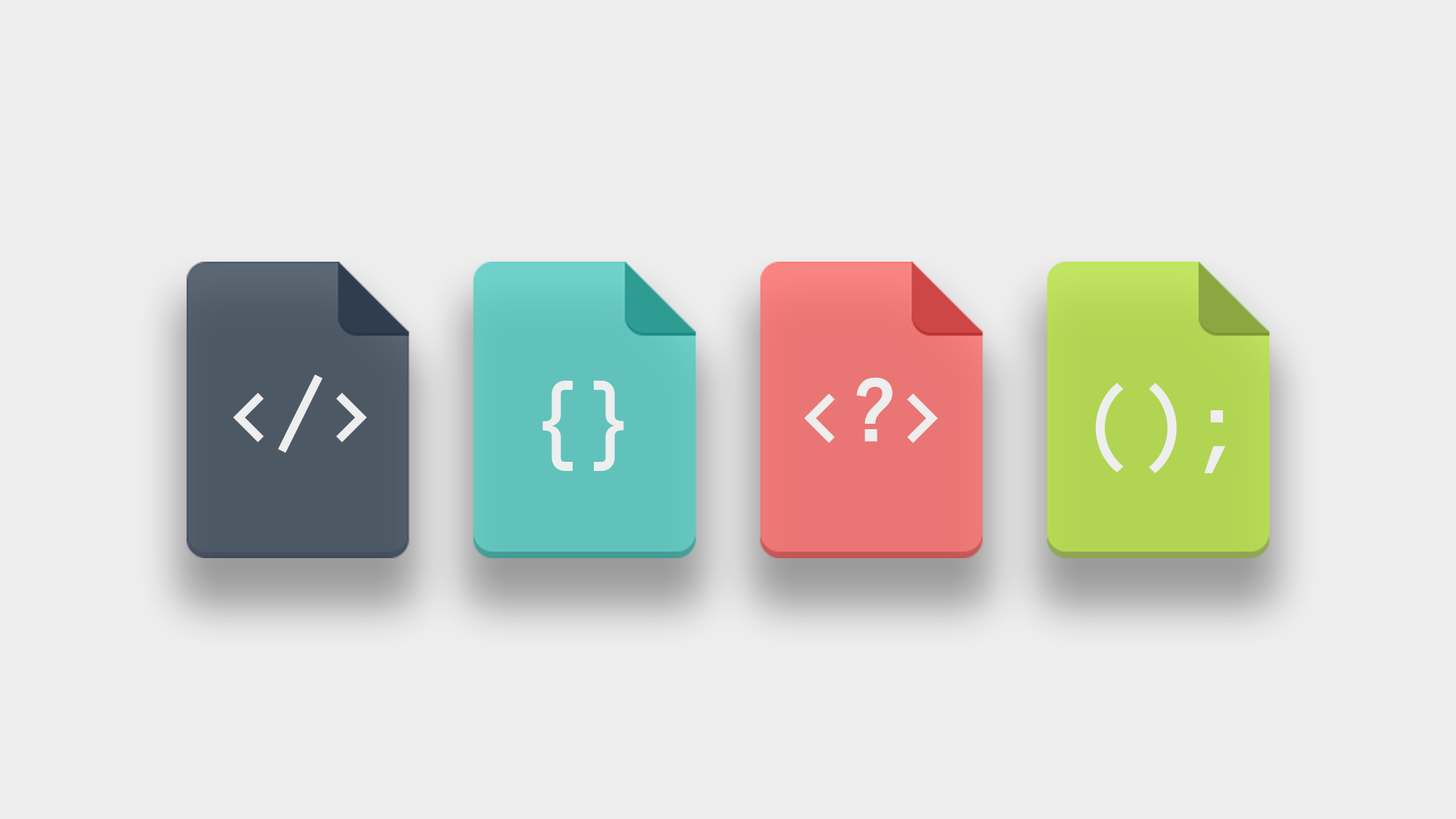
<style>
.page{position:relative;width:1456px;height:819px;background:#eeeeee}
.page>*{position:absolute;margin:0}
.t1{font:98.6px "AnonymousPro-Bold";color:#eeeeee}
</style>
<div class="page">
<p class="t1" style="left:233px;top:375px;width:134px;height:78px">&lt;/&gt;</p>
<p class="t1" style="left:804px;top:378px;width:134px;height:65px">&lt;?&gt;</p>
<p class="t1" style="left:542px;top:381px;width:82px;height:90px">{}</p>
<p class="t1" style="left:1095px;top:383px;width:130px;height:90px">();</p>
</div>
